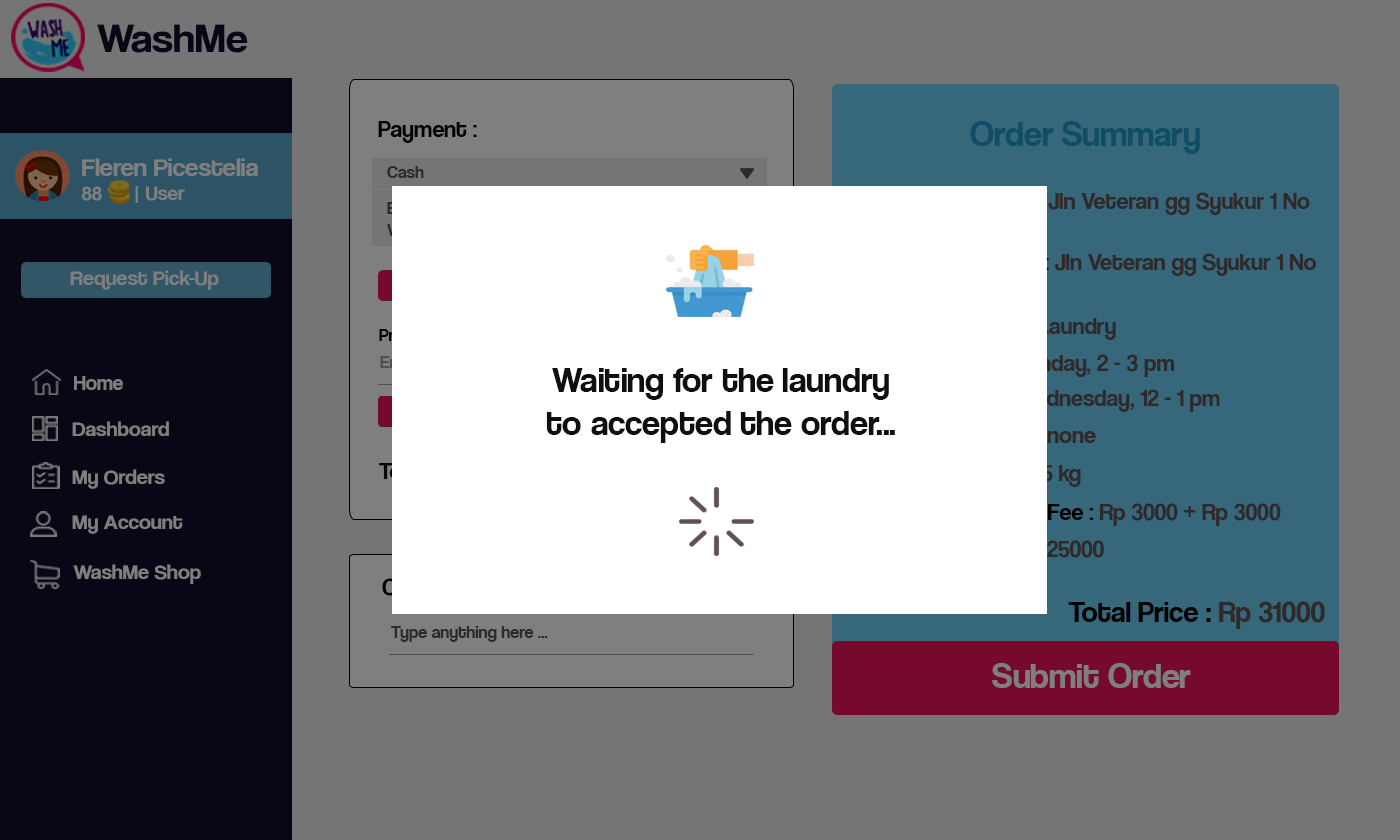
<style>
.page{position:relative;width:1400px;height:840px;background:#757575}
.page>*{position:absolute;margin:0}
.t1{font:42.1px "CoolveticaRg-Regular";color:#120f2b;scale:1.05 1}
.t2{font:24px "CoolveticaRg-Regular";color:#000000}
.t3{font:36px "CoolveticaRg-Regular";color:#104e67}
.t4{font:25.2px "CoolveticaRg-Regular";color:#7f7f7f;scale:1.05 1}
.t5{font:20px "CoolveticaRg-Regular";color:#7f7f7f;scale:1.05 1}
.t6{font:18px "CoolveticaRg-Regular";color:#302929}
.t7{font:21px "CoolveticaRg-Regular";color:#7f7f7f;scale:1.05 1}
.t8{font:21px "CoolveticaRg-Regular";color:#7f7f7f}
.t9{font:36px "CoolveticaRg-Regular";color:#100e0e}
.t10{font:30px "CoolveticaRg-Regular"}
.t11{font:17.8px "CoolveticaRg-Regular";color:#302929}
.t12{font:36px "CoolveticaRg-Regular";color:#7f7f7f}
</style>
<div class="page">
<p class="t1" style="left:97px;top:24px;width:151px;height:29px">WashMe</p>
<p class="t2" style="left:378px;top:121px;width:99px;height:22px">Payment :</p>
<p class="t3" style="left:970px;top:121px;width:230px;height:33px">Order Summary</p>
<p class="t4" style="left:81px;top:158px;width:177px;height:45px">Fleren Picestelia<br><span class="t5">88      | User</span></p>
<p class="t6" style="left:387px;top:166px;width:37px;height:12px">Cash</p>
<p class="t7" style="left:70px;top:270px;width:149px;height:20px">Request Pick-Up</p>
<p class="t8" style="left:74px;top:376px;width:49px;height:14px">Home</p>
<p class="t9" style="left:546px;top:368px;width:349px;height:75px;text-align:center">Waiting for the laundry<br>to accepted the order...</p>
<p class="t7" style="left:72px;top:421px;width:97px;height:15px">Dashboard</p>
<p class="t7" style="left:72px;top:469px;width:93px;height:20px">My Orders</p>
<p class="t7" style="left:72px;top:515px;width:111px;height:19px">My Account</p>
<p class="t7" style="left:73px;top:564px;width:128px;height:20px">WashMe Shop</p>
<p class="t10" style="left:1068px;top:601px;width:257px;height:28px">Total Price : Rp 31000</p>
<p class="t11" style="left:391px;top:626px;width:157px;height:16px">Type anything here ...</p>
<p class="t12" style="left:992px;top:663px;width:199px;height:25px">Submit Order</p>
</div>
